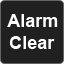
<style>
.page{position:relative;width:64px;height:64px;background:#202020}
.page>*{position:absolute;margin:0}
.t1{font:18px "Arial-BoldMT";color:#ffffff}
</style>
<div class="page">
<p class="t1" style="left:7px;top:14px;width:51px;height:13px">Alarm</p>
<p class="t1" style="left:9px;top:36px;width:46px;height:13px">Clear</p>
</div>
